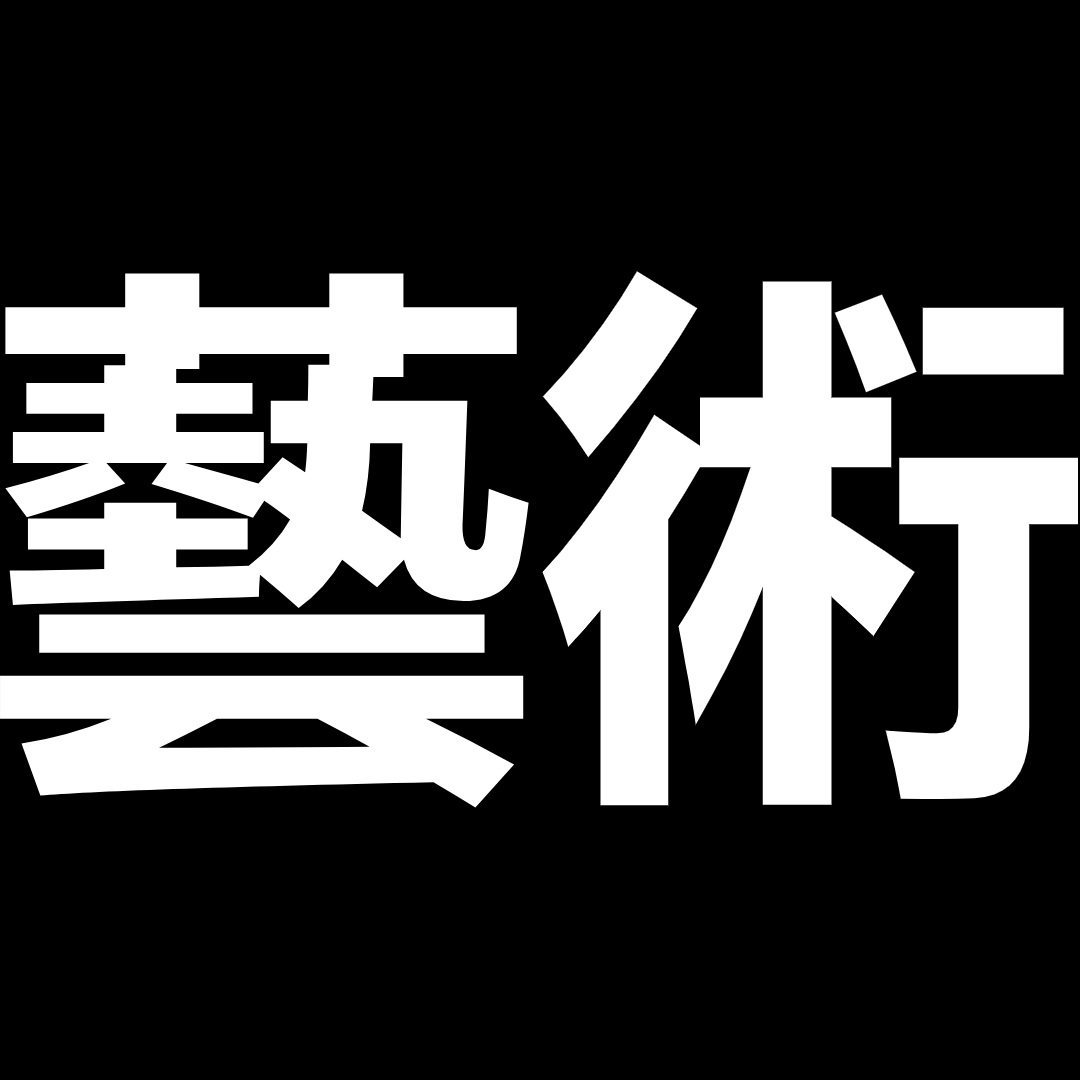
<style>
.page{position:relative;width:1080px;height:1080px;background:#000000}
.page>*{position:absolute;margin:0}
.t1{font:550.1px "MicrosoftYaHei";color:#ffffff}
</style>
<div class="page">
<p class="t1" style="left:0px;top:271px;width:1078px;height:537px">藝術</p>
</div>
